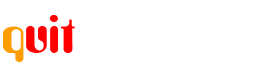
<style>
.page{position:relative;width:279px;height:68px;background:#ffffff}
.page>*{position:absolute;margin:0}
.t1{font:48px "Asimov";color:#ff0000}
.t2{font:48px "Asimov";color:#ff9c00}
</style>
<div class="page">
<p class="t1" style="left:3px;top:15px;width:72px;height:47px"><span class="t2">q</span>uit</p>
</div>
